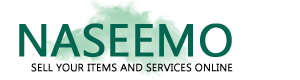
<style>
.page{position:relative;width:300px;height:80px;background:#ffffff}
.page>*{position:absolute;margin:0}
.t1{font:45.8px "Ebrima";color:#00664f;font-weight:bold}
.t2{font:10.4px "Ebrima";color:#000000;font-weight:bold}
</style>
<div class="page">
<p class="t1" style="left:19px;top:23px;width:213px;height:34px">NASEEMO</p>
<p class="t2" style="left:31px;top:63px;width:202px;height:9px">SELL YOUR ITEMS AND SERVICES ONLINE</p>
</div>
